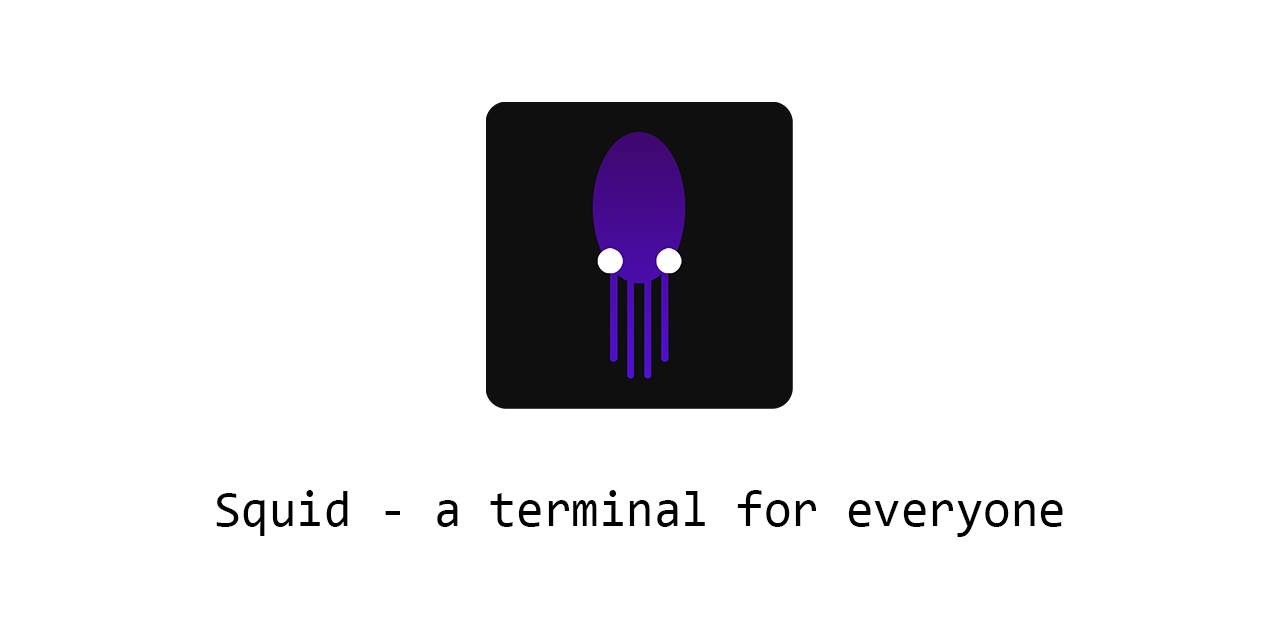
<style>
.page{position:relative;width:1280px;height:640px;background:#ffffff}
.page>*{position:absolute;margin:0}
.t1{font:50px "Consolas";color:#000000}
</style>
<div class="page">
<p class="t1" style="left:216px;top:490px;width:847px;height:47px">Squid - a terminal for everyone</p>
</div>
